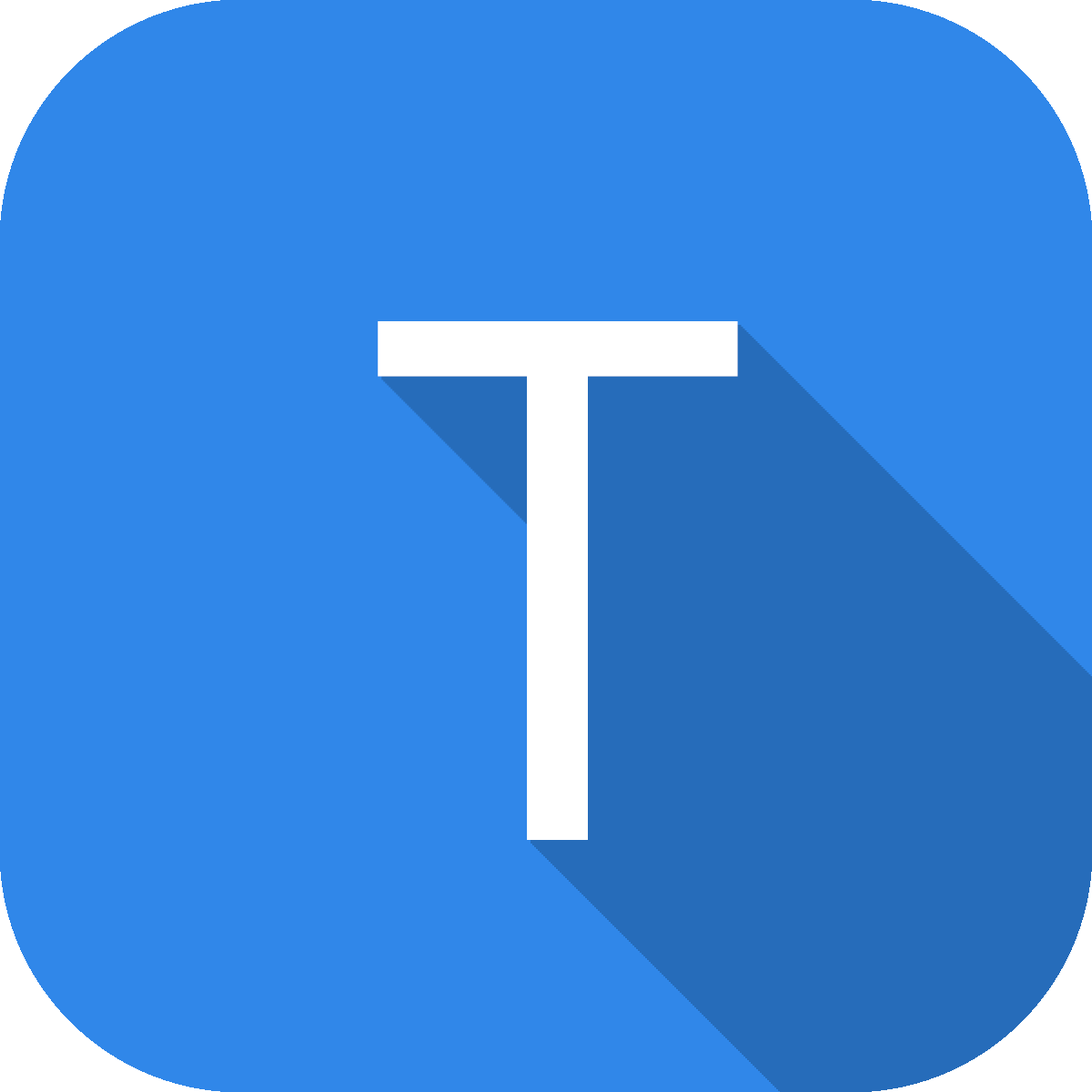
<style>
.page{position:relative;width:1092px;height:1092px;background:#3087e9}
.page>*{position:absolute;margin:0}
.t1{font:740.6px "Leelawadee";color:#ffffff}
</style>
<div class="page">
<p class="t1" style="left:378px;top:321px;width:360px;height:519px">T</p>
</div>
